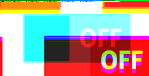
<style>
.page{position:relative;width:149px;height:76px;background:#ffffff}
.page>*{position:absolute;margin:0}
.t1{font:24.9px "Aller-Bold";letter-spacing:-0.01em}
</style>
<div class="page">
<p class="t1" style="left:80px;top:27px;width:42px;height:20px">OFF</p>
</div>
